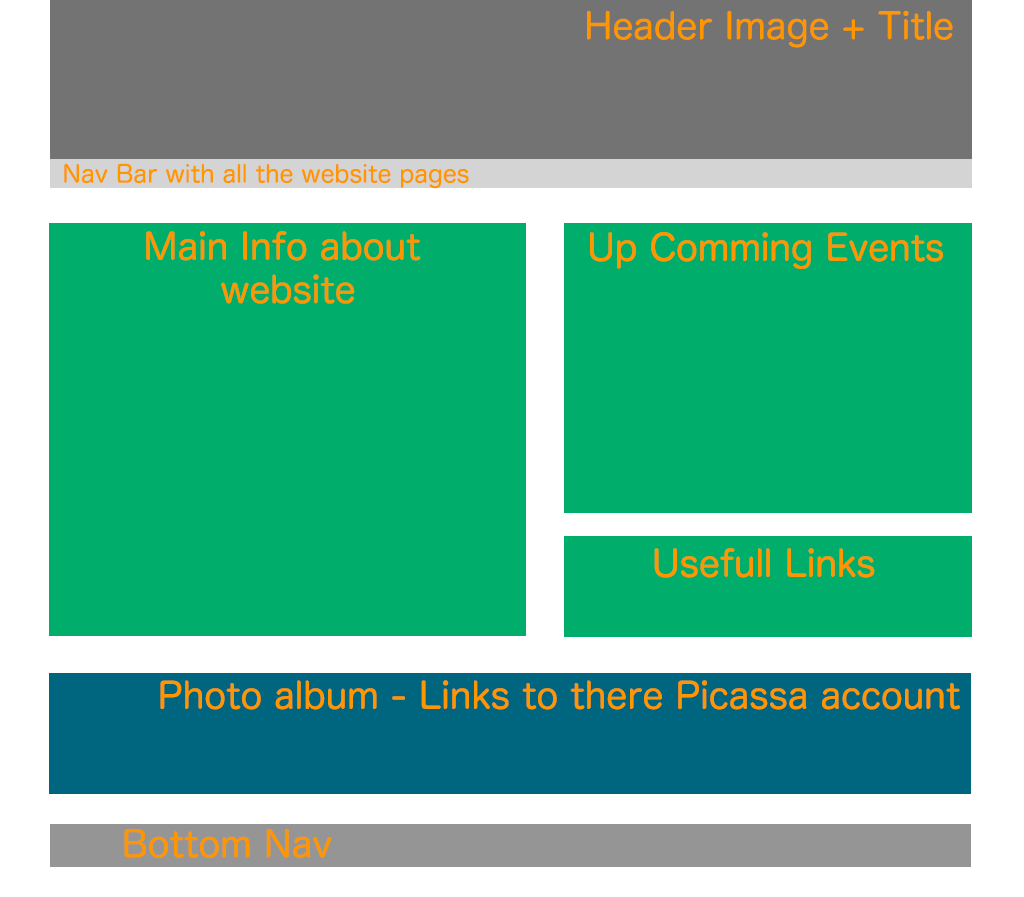
<style>
.page{position:relative;width:1024px;height:897px;background:#00ad6a}
.page>*{position:absolute;margin:0}
.t1{font:36px "HiraMaruProN-W4";color:#ff9600}
.t2{font:24px "HiraMaruProN-W4";color:#ff9600}
</style>
<div class="page">
<p class="t1" style="left:587px;top:10px;width:366px;height:38px">Header Image + Title</p>
<p class="t2" style="left:64px;top:163px;width:405px;height:26px">Nav Bar with all the website pages</p>
<p class="t1" style="left:146px;top:231px;width:275px;height:73px;text-align:center">Main Info about <br>website</p>
<p class="t1" style="left:590px;top:232px;width:353px;height:37px">Up Comming Events</p>
<p class="t1" style="left:654px;top:548px;width:221px;height:30px">Usefull Links</p>
<p class="t1" style="left:160px;top:680px;width:800px;height:30px">Photo album - Links to there Picassa account</p>
<p class="t1" style="left:124px;top:828px;width:208px;height:30px">Bottom Nav</p>
</div>
